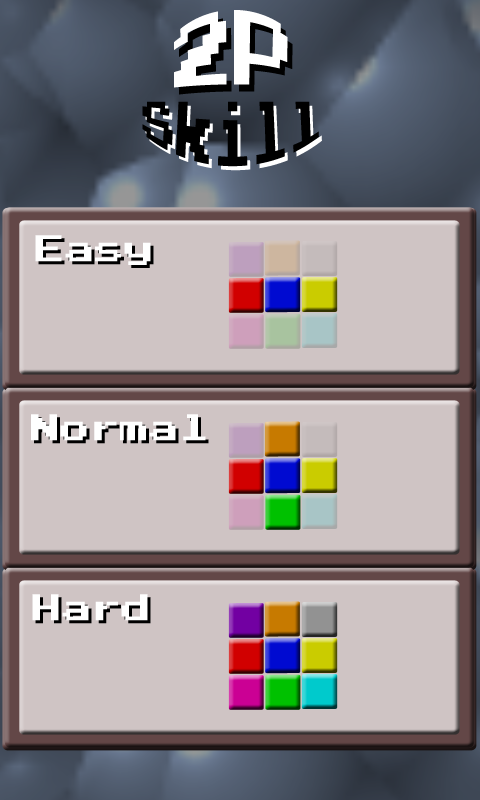
<style>
.page{position:relative;width:480px;height:800px;background:#cfc4c4}
.page>*{position:absolute;margin:0}
.t1{font:60px "PressStart2P";color:#ffffff}
.t2{font:36px "PressStart2P";color:#000000}
.t3{font:29.7px "PressStart2P";color:#ffffff}
.t4{font:29.7px "PressStart2P"}
</style>
<div class="page">
<p class="t1" style="left:174px;top:10px;width:114px;height:78px">2P</p>
<p class="t2" style="left:142px;top:101px;width:177px;height:66px;text-align:center">Skill</p>
<p class="t3" style="left:35px;top:235px;width:116px;height:30px">Easy</p>
<p class="t4" style="left:38px;top:238px;width:116px;height:30px">Easy</p>
<p class="t3" style="left:31px;top:414px;width:175px;height:27px">Normal</p>
<p class="t4" style="left:34px;top:417px;width:175px;height:27px">Normal</p>
<p class="t3" style="left:32px;top:594px;width:116px;height:27px">Hard</p>
<p class="t4" style="left:35px;top:597px;width:116px;height:27px">Hard</p>
</div>
